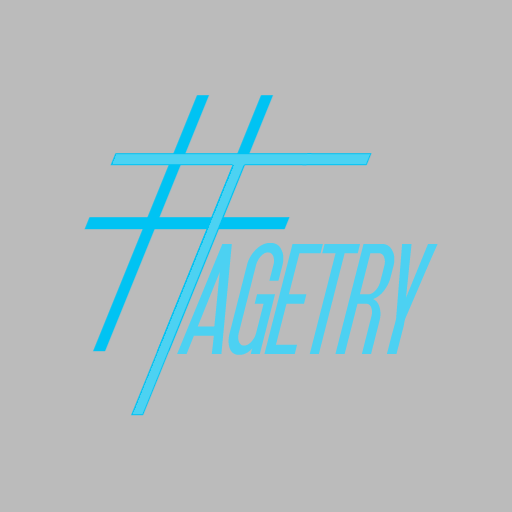
<style>
.page{position:relative;width:512px;height:512px;background:#bbbbbb}
.page>*{position:absolute;margin:0}
.t1{font:220px "SFMoviePosterCondensed-Oblique";color:#4cd1f2;scale:1.2 1}
</style>
<div class="page">
<p class="t1" style="left:177px;top:243px;width:261px;height:112px">agetry</p>
</div>
